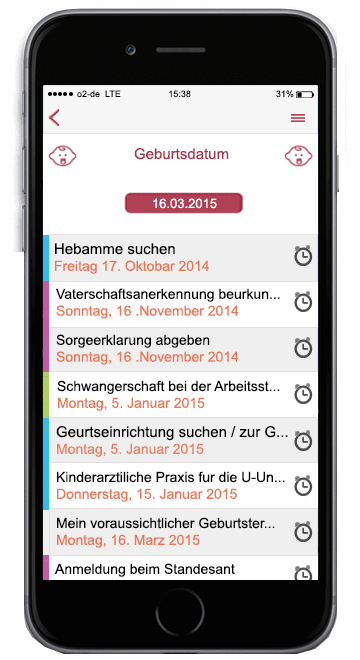
<style>
.page{position:relative;width:360px;height:660px;background:#ffffff}
.page>*{position:absolute;margin:0}
.t1{font:9px "ArialMT";color:#000000}
.t2{font:15px "ArialMT";color:#a8354a}
.t3{font:13px "ArialMT";color:#ffffff}
.t4{font:14px "ArialMT";color:#ed7755}
.t5{font:15px "ArialMT";color:#000000}
.t6{font:14px "ArialMT";color:#000000}
.t7{font:14px "ArialMT";color:#ed8062}
</style>
<div class="page">
<p class="t1" style="left:77px;top:90px;width:217px;height:8px">o2-de  LTE                   15:38                                  31%</p>
<p class="t2" style="left:134px;top:148px;width:95px;height:12px">Geburtsdatum</p>
<p class="t3" style="left:153px;top:198px;width:64px;height:11px">16.03.2015</p>
<p class="t4" style="left:55px;top:243px;width:154px;height:31px"><span class="t5">Hebamme suchen<br></span>Freitag 17. Oktobar 2014</p>
<p class="t6" style="left:56px;top:288px;width:224px;height:31px"><span class="t4"><br></span>Vaterschaftsanerkennung beurkun...<br><span class="t4">Sonntag, 16 .November 2014</span></p>
<p class="t4" style="left:56px;top:334px;width:183px;height:31px"><span class="t6">Sorgeerklarung abgeben<br></span>Sonntag, 16 .November 2014</p>
<p class="t6" style="left:57px;top:380px;width:223px;height:31px">Schwangerschaft bei der Arbeitsst...<br><span class="t4">Montag, 5. Januar 2015</span></p>
<p class="t5" style="left:56px;top:426px;width:232px;height:31px">Geurtseinrichtung suchen / zur G...<br><span class="t7">Montag, 5. Januar 2015</span></p>
<p class="t6" style="left:57px;top:471px;width:228px;height:31px">Kinderarztiliche Praxis fur die U-Un...<br><span class="t4">Donnerstag, 15. Januar 2015</span></p>
<p class="t6" style="left:57px;top:517px;width:218px;height:31px">Mein voraussichtlicher Geburtster...<br><span class="t4">Montag, 16. Marz 2015</span></p>
<p class="t6" style="left:54px;top:563px;width:181px;height:14px"><span class="t4"><br></span>Anmeldung beim Standesant</p>
</div>
